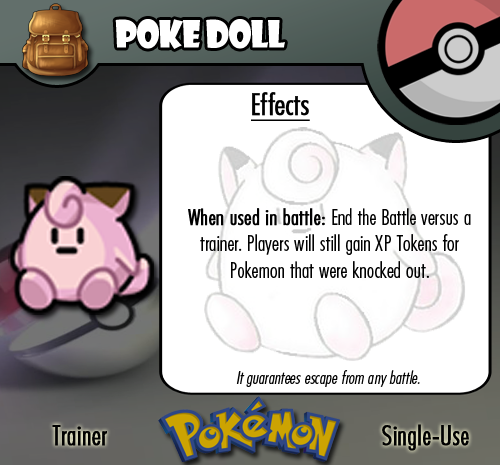
<style>
.page{position:relative;width:500px;height:465px;background:#ffffff}
.page>*{position:absolute;margin:0}
.t1{font:36.7px "ShowcardGothic-Reg";letter-spacing:-0.025em;color:#ffffff;scale:0.91 1}
.t2{font:22.2px "FuturaCondensedBQ-Light";color:#010101}
.t3{font:27.8px "FuturaCondensedBQ-Light";color:#010101;font-weight:bold}
.t4{font:30.6px "FuturaCondensedBQ-Light";color:#010101;font-weight:bold;text-decoration:underline}
.t5{font:22.2px "FuturaCondensedBQ-Light";color:#010101;font-weight:bold}
.t6{font:18.1px "FuturaCondensedBQ-Light";color:#010101;font-style:italic}
</style>
<div class="page">
<p class="t1" style="left:115px;top:19px;width:170px;height:30px">Poke doll</p>
<p class="t2" style="left:188px;top:92px;width:283px;height:186px"><span class="t3">  </span><span class="t4">Effects<br><br><br><br><br><br><br></span><span class="t5">When used in battle: </span>End the Battle versus a trainer. Players will still gain XP Tokens for Pokemon that were knocked out.</p>
<p class="t6" style="left:236px;top:370px;width:184px;height:17px">It guarantees escape from any battle.</p>
<p class="t3" style="left:52px;top:425px;width:55px;height:21px">Trainer</p>
<p class="t3" style="left:382px;top:424px;width:87px;height:27px">Single-Use</p>
</div>
